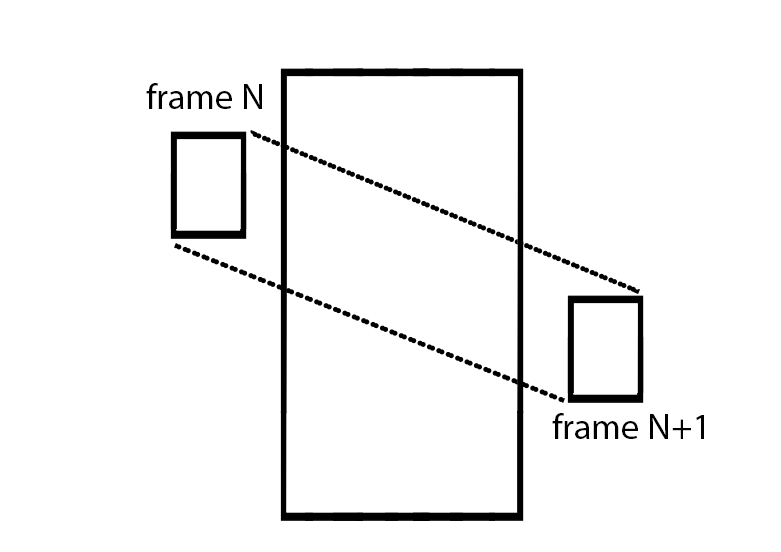
<style>
.page{position:relative;width:781px;height:552px;background:#ffffff}
.page>*{position:absolute;margin:0}
.t1{font:36px "MyriadPro-Regular";color:#000000}
</style>
<div class="page">
<p class="t1" style="left:146px;top:83px;width:116px;height:26px">frame N</p>
<p class="t1" style="left:552px;top:413px;width:152px;height:26px">frame N+1</p>
</div>
